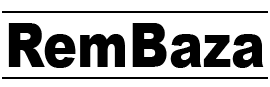
<style>
.page{position:relative;width:270px;height:87px;background:#ffffff}
.page>*{position:absolute;margin:0}
.t1{font:60.8px "Arial-Black";color:#000000;scale:0.84 1}
</style>
<div class="page">
<p class="t1" style="left:8px;top:23px;width:256px;height:45px">RemBaza</p>
</div>
